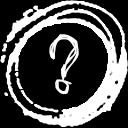
<style>
.page{position:relative;width:128px;height:128px;background:#000000}
.page>*{position:absolute;margin:0}
.t1{font:130px "ScratchBasic";color:#ffffff}
</style>
<div class="page">
<p class="t1" style="left:49px;top:34px;width:30px;height:61px">?</p>
</div>
